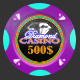
<style>
.page{position:relative;width:80px;height:80px;background:#333333}
.page>*{position:absolute;margin:0}
.t1{font:10.8px/3.6px "EdwardianScriptITC";color:#fda047}
.t2{font:6.3px/5.4px "Castellar";color:#fda047;scale:1.5 1}
.t3{font:10.6px "BernardMT-Condensed";color:#e19012;scale:1.22 1}
</style>
<div class="page">
<p class="t1" style="left:19px;top:30px;width:41px;height:14px;text-align:justify">Diamond<br><span class="t2">CASINO</span></p>
<p class="t3" style="left:28px;top:45px;width:25px;height:10px">500$</p>
</div>
